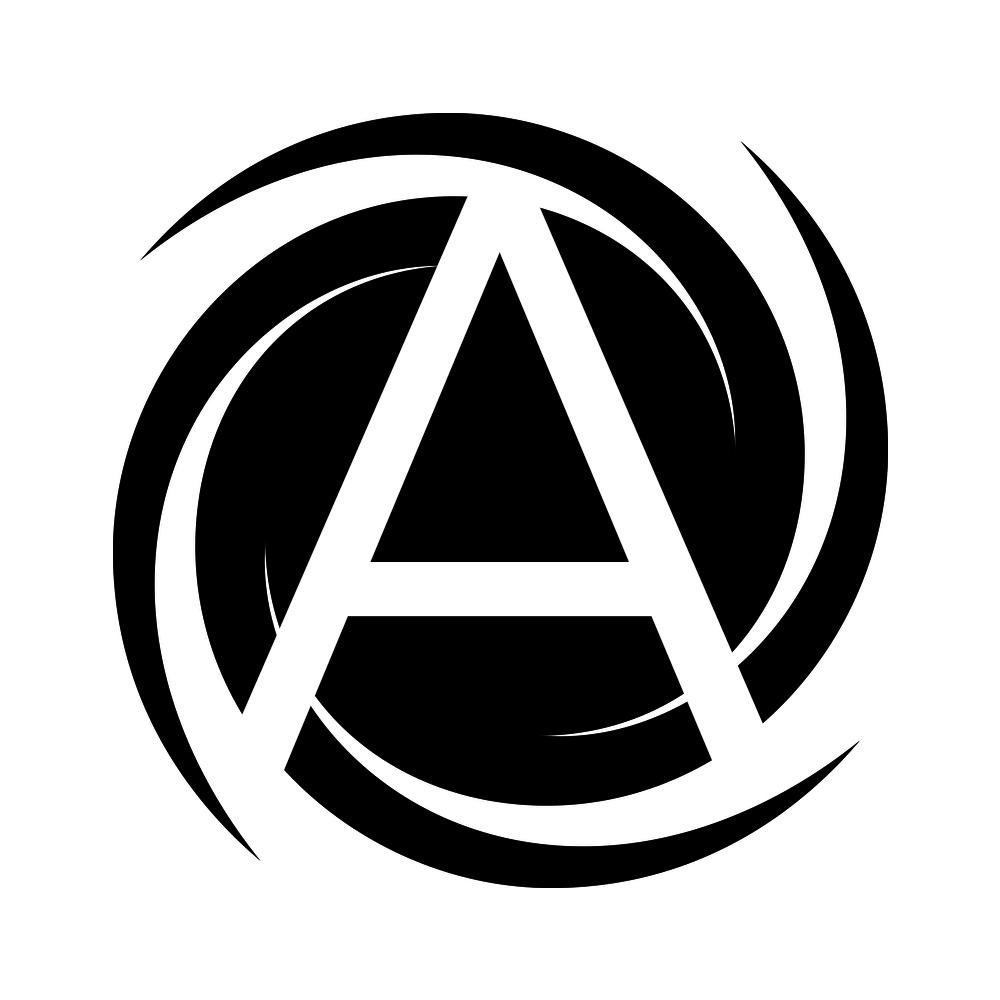
<style>
.page{position:relative;width:1000px;height:1000px;background:#ffffff}
.page>*{position:absolute;margin:0}
.t1{font:825px "AvenirNext-Regular";color:#ffffff}
</style>
<div class="page">
<p class="t1" style="left:218px;top:186px;width:565px;height:584px">A</p>
</div>
